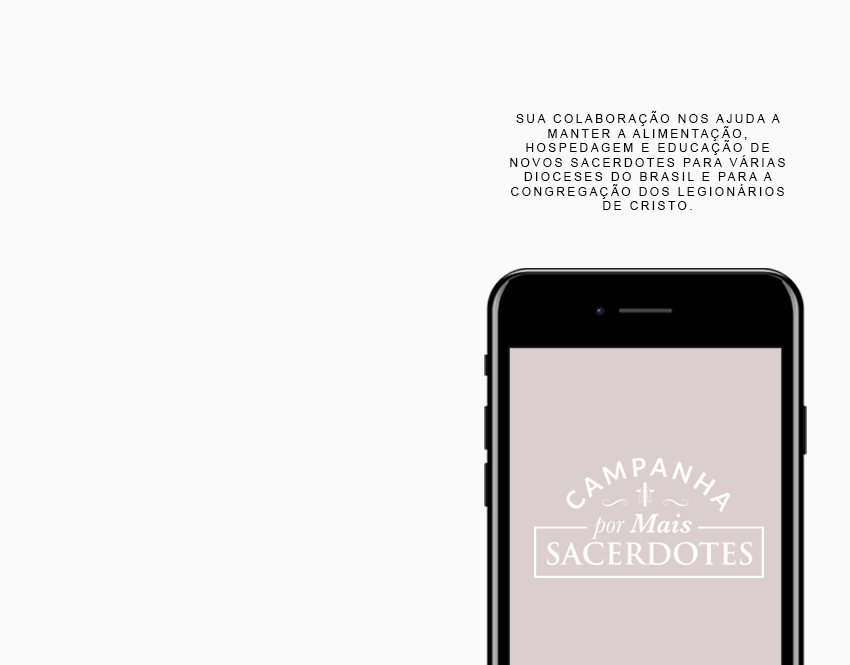
<style>
.page{position:relative;width:850px;height:665px;background:#fafafa}
.page>*{position:absolute;margin:0}
.t1{font:12px "ArialMT";letter-spacing:0.2em;color:#000000;text-transform:uppercase}
</style>
<div class="page">
<p class="t1" style="left:510px;top:111px;width:275px;height:99px;text-align:center">Sua colaboração nos ajuda a manter a alimentação, hospedagem e educação de novos sacerdotes para várias dioceses do Brasil e para a Congregação dos Legionários de Cristo.</p>
</div>
